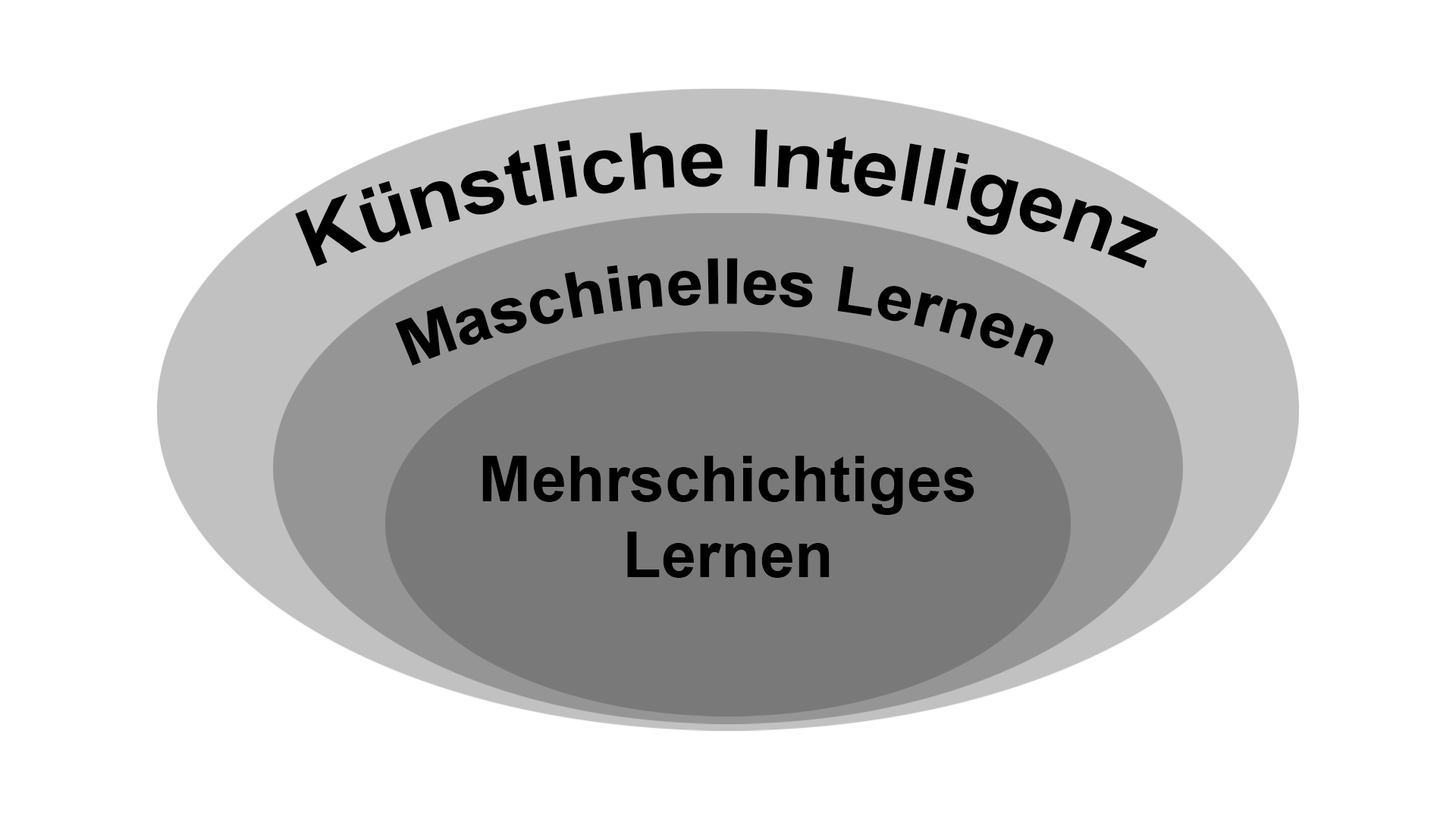
<style>
.page{position:relative;width:1456px;height:819px;background:#ffffff}
.page>*{position:absolute;margin:0}
.t1{font:79px "Arial-BoldMT";color:#000000}
.t2{font:63.2px "Arial-BoldMT";color:#000000}
</style>
<div class="page">
<p class="t1" style="left:295px;top:129px;width:864px;height:139px;text-align:center">Künstliche Intelligenz</p>
<p class="t2" style="left:395px;top:258px;width:658px;height:108px;text-align:center">Maschinelles Lernen</p>
<p class="t2" style="left:482px;top:456px;width:492px;height:122px;text-align:center">Mehrschichtiges<br>Lernen</p>
</div>
